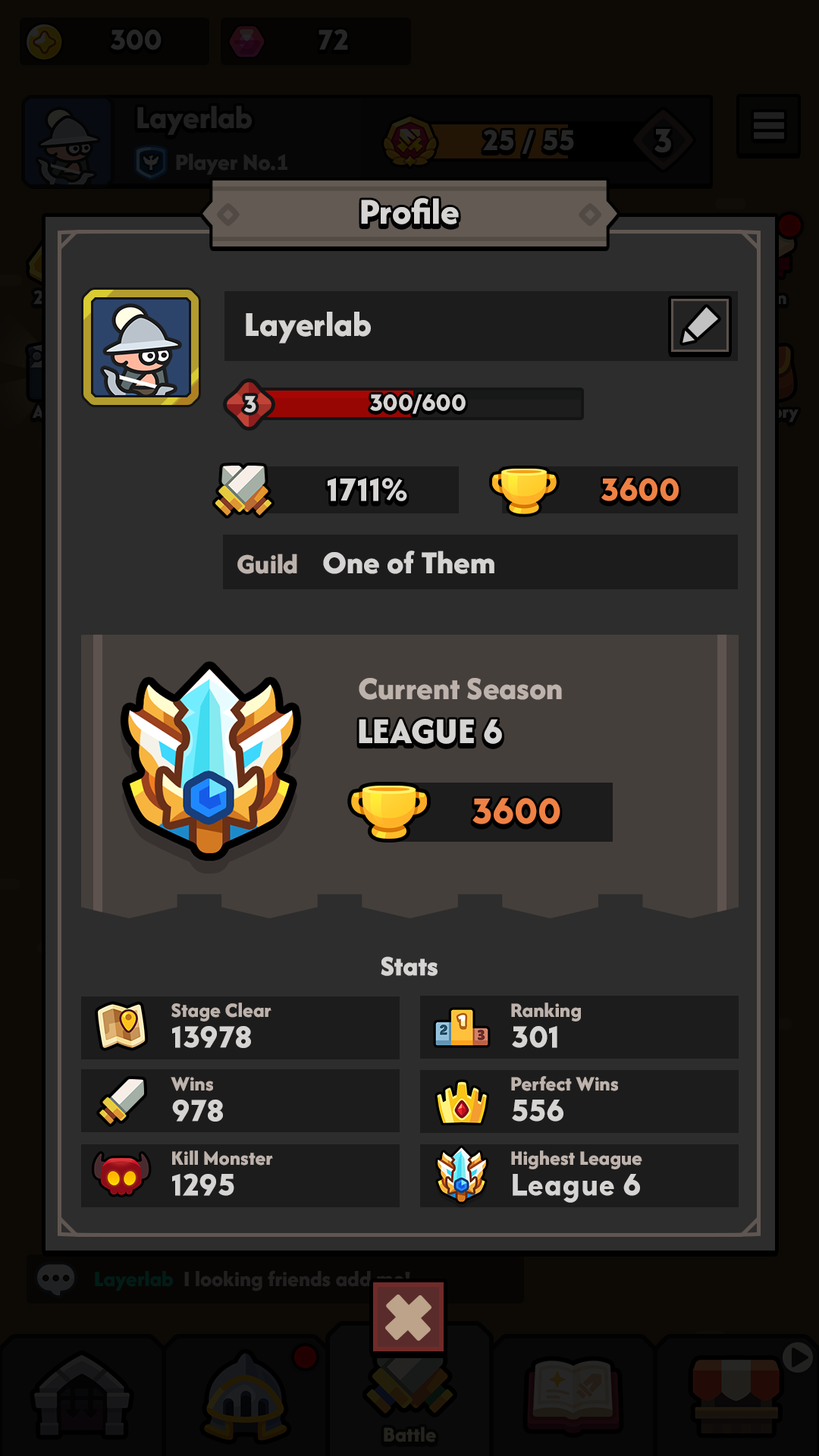
<style>
.page{position:relative;width:819px;height:1456px;background:#2d2d2d}
.page>*{position:absolute;margin:0}
.t1{font:37.9px "AfacadFlux-ExtraBold";color:#d6d4d3}
.t2{font:36.4px "AfacadFlux-ExtraBold";color:#d6d4d3}
.t3{font:24.3px "LTAvocado-Bold";color:#d6d4d3;text-transform:uppercase}
.t4{font:24.3px "LTAvocado-Bold";color:#d6d4d3}
.t5{font:33.4px "LTAvocado-Bold";color:#d6d4d3}
.t6{font:33.4px "LTAvocado-Bold";color:#ee8145}
.t7{font:28.8px "AfacadFlux-ExtraBold";color:#bdb2ac}
.t8{font:33.4px "AfacadFlux-ExtraBold";color:#d6d4d3}
.t9{font:33.4px "AfacadFlux-ExtraBold";color:#bdb2ac}
.t10{font:37.9px "AfacadFlux-ExtraBold";color:#d6d4d3;text-transform:uppercase}
.t11{font:37.9px "LTAvocado-Bold";color:#ee8145}
.t12{font:28.8px "AfacadFlux-ExtraBold";color:#d6d4d3}
.t13{font:21.2px "AfacadFlux-ExtraBold";color:#bdb2ac}
.t14{font:31.8px "LTAvocado-Bold";color:#d6d4d3}
</style>
<div class="page">
<p class="t1" style="left:361px;top:198px;width:98px;height:26px">Profile</p>
<p class="t2" style="left:246px;top:312px;width:125px;height:32px">Layerlab</p>
<p class="t3" style="left:244px;top:396px;width:12px;height:17px">3</p>
<p class="t4" style="left:370px;top:394px;width:96px;height:20px">300/600</p>
<p class="t5" style="left:328px;top:478px;width:79px;height:23px">1711%</p>
<p class="t6" style="left:601px;top:478px;width:78px;height:23px">3600</p>
<p class="t7" style="left:237px;top:554px;width:60px;height:20px">Guild</p>
<p class="t8" style="left:323px;top:551px;width:171px;height:23px">One of Them</p>
<p class="t9" style="left:359px;top:678px;width:203px;height:22px">Current Season</p>
<p class="t10" style="left:359px;top:719px;width:143px;height:25px">League 6</p>
<p class="t11" style="left:472px;top:798px;width:88px;height:26px">3600</p>
<p class="t12" style="left:381px;top:956px;width:57px;height:20px">Stats</p>
<p class="t13" style="left:171px;top:1003px;width:100px;height:18px">Stage Clear</p>
<p class="t13" style="left:511px;top:1003px;width:70px;height:18px">Ranking</p>
<p class="t14" style="left:172px;top:1026px;width:79px;height:22px">13978</p>
<p class="t14" style="left:512px;top:1026px;width:45px;height:22px">301</p>
<p class="t13" style="left:171px;top:1077px;width:42px;height:14px">Wins</p>
<p class="t13" style="left:511px;top:1076px;width:107px;height:15px">Perfect Wins</p>
<p class="t14" style="left:172px;top:1100px;width:51px;height:22px">978</p>
<p class="t14" style="left:512px;top:1100px;width:51px;height:22px">556</p>
<p class="t13" style="left:172px;top:1150px;width:101px;height:16px">Kill Monster</p>
<p class="t13" style="left:511px;top:1150px;width:131px;height:19px">Highest League</p>
<p class="t14" style="left:172px;top:1173px;width:62px;height:23px">1295</p>
<p class="t14" style="left:513px;top:1174px;width:127px;height:29px">League 6</p>
</div>
